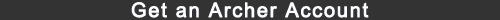
<style>
.page{position:relative;width:500px;height:20px;background:#333333}
.page>*{position:absolute;margin:0}
.t1{font:20px "ArialMT";letter-spacing:0.06em;color:#ffffff;font-weight:bold}
</style>
<div class="page">
<p class="t1" style="left:131px;top:2px;width:238px;height:16px">Get an Archer Account</p>
</div>
